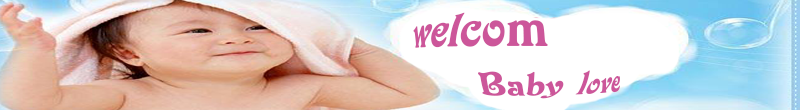
<style>
.page{position:relative;width:800px;height:110px}
.page>*{position:absolute;margin:0}
.t1{font:36px "VictorianLetPlain";color:#cc569a}
.t2{font:48px "VictorianLetPlain";color:#cc569a}
</style>
<div class="page">
<p class="t1" style="left:413px;top:12px;width:207px;height:87px"><span class="t2">welcom<br></span>  Baby  love</p>
</div>
